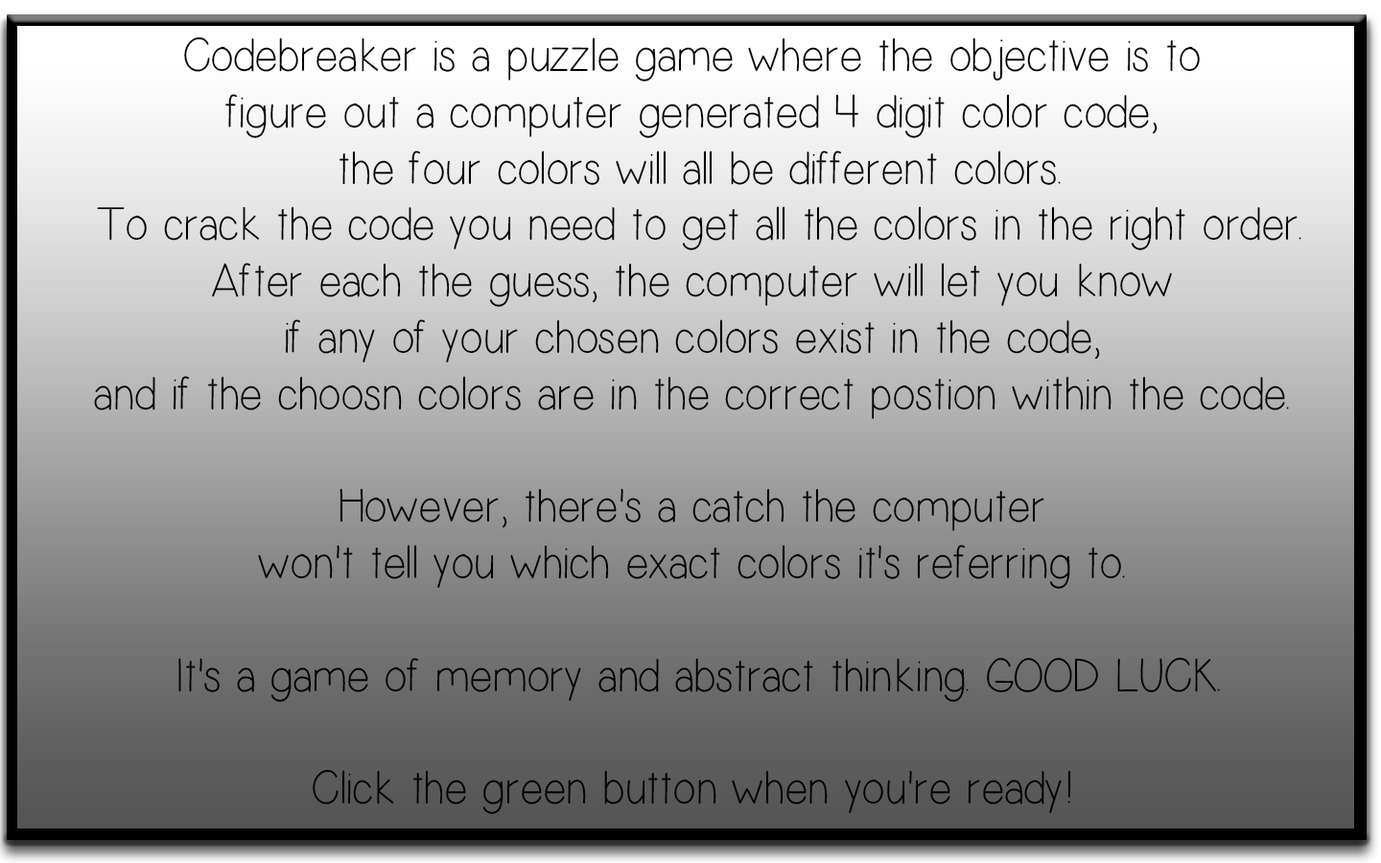
<style>
.page{position:relative;width:1381px;height:863px}
.page>*{position:absolute;margin:0}
.t1{font:47px "Simplicity";letter-spacing:0.02em;color:#000000}
</style>
<div class="page">
<p class="t1" style="left:94px;top:36px;width:1208px;height:778px;text-align:center">Codebreaker is a puzzle game where the objective is to <br>figure out a computer generated 4 digit color code, <br>the four colors will all be different colors.<br>To crack the code you need to get all the colors in the right order.<br>After each the guess, the computer will let you know <br>if any of your chosen colors exist in the code, <br>and if the choosn colors are in the correct postion within the code. <br><br>However, there's a catch the computer <br>won't tell you which exact colors it's referring to. <br><br>It's a game of memory and abstract thinking. GOOD LUCK.<br><br>Click the green button when you're ready!</p>
</div>
